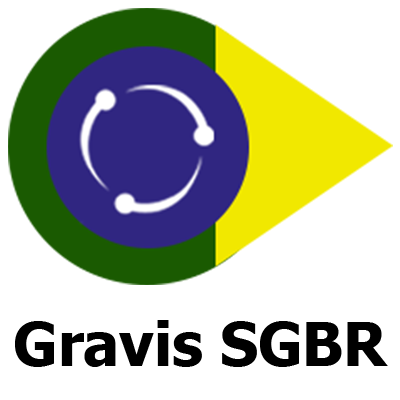
<style>
.page{position:relative;width:400px;height:400px;background:#ffffff}
.page>*{position:absolute;margin:0}
.t1{font:59.7px "Tahoma-Bold";color:#000000}
</style>
<div class="page">
<p class="t1" style="left:15px;top:320px;width:373px;height:47px">Gravis SGBR</p>
</div>
